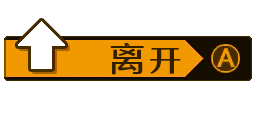
<style>
.page{position:relative;width:256px;height:128px;background:#ffffff}
.page>*{position:absolute;margin:0}
.t1{font:33.3px "FZYASHS_ZHONG--GB1-0";letter-spacing:0.125em;color:#301f00;scale:1.1 1}
.t2{font:29.3px "FZYASHS_ZHONG--GB1-0";letter-spacing:0.125em;color:#301f00;scale:1.1 1}
</style>
<div class="page">
<p class="t1" style="left:110px;top:43px;width:34px;height:32px">离</p>
<p class="t2" style="left:150px;top:48px;width:31px;height:26px">开</p>
</div>
